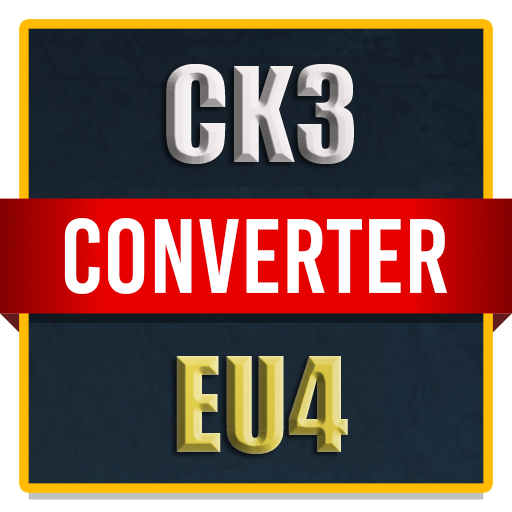
<style>
.page{position:relative;width:512px;height:512px}
.page>*{position:absolute;margin:0}
.t1{font:120.8px "Impact"}
</style>
<div class="page">
<p class="t1" style="left:166px;top:64px;width:188px;height:390px;text-align:center">CK3<br><br>EU4</p>
</div>
